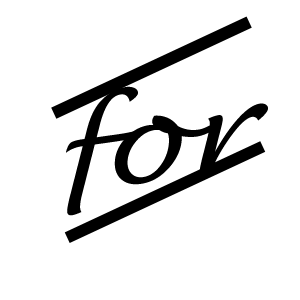
<style>
.page{position:relative;width:300px;height:300px;background:#ffffff}
.page>*{position:absolute;margin:0}
.t1{font:112.4px "LucidaHandwriting-Italic";color:#000000;font-style:italic;scale:1.09 1}
</style>
<div class="page">
<p class="t1" style="left:66px;top:86px;width:202px;height:130px;rotate:-8deg">for</p>
</div>
